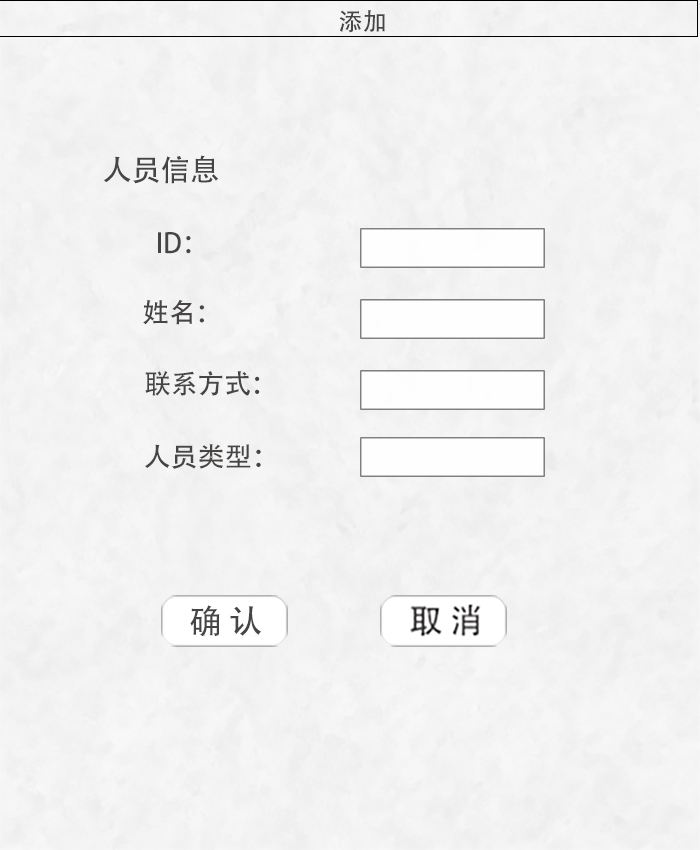
<style>
.page{position:relative;width:700px;height:850px}
.page>*{position:absolute;margin:0}
.t1{font:24px "AdobeHeitiStd-Regular";letter-spacing:-0.005em;color:#474444;text-transform:uppercase}
.t2{font:29.7px "AdobeHeitiStd-Regular";letter-spacing:-0.005em;color:#474444;text-transform:uppercase}
.t3{font:27px "AdobeHeitiStd-Regular";letter-spacing:-0.005em;color:#474444;text-transform:uppercase}
</style>
<div class="page">
<p class="t1" style="left:339px;top:10px;width:46px;height:23px">添加</p>
<p class="t2" style="left:103px;top:155px;width:115px;height:29px">人员信息</p>
<p class="t3" style="left:158px;top:232px;width:33px;height:22px">ID：</p>
<p class="t3" style="left:143px;top:299px;width:61px;height:26px">姓名：</p>
<p class="t3" style="left:145px;top:371px;width:115px;height:25px">联系方式：</p>
<p class="t3" style="left:145px;top:444px;width:116px;height:25px">人员类型：</p>
</div>
